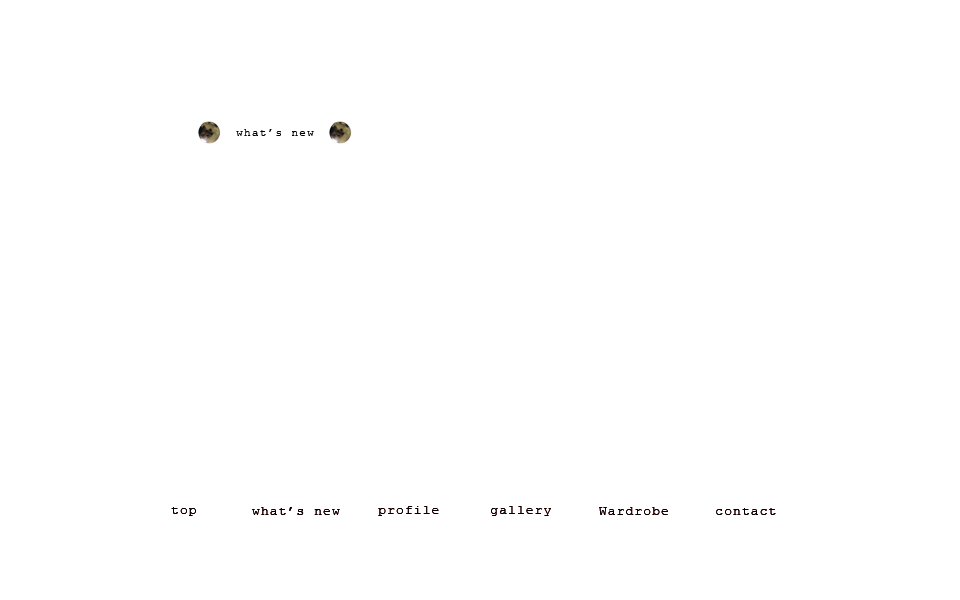
<style>
.page{position:relative;width:960px;height:600px;background:#ffffff}
.page>*{position:absolute;margin:0}
.t1{font:11.1px "CourierNewPSMT";letter-spacing:0.11em;color:#000000}
.t2{font:12.5px "CourierNewPSMT";letter-spacing:0.11em;color:#000000}
</style>
<div class="page">
<p class="t1" style="left:236px;top:129px;width:78px;height:7px">what’s new</p>
<p class="t2" style="left:171px;top:507px;width:25px;height:9px">top</p>
<p class="t2" style="left:171px;top:507px;width:25px;height:9px">top</p>
<p class="t2" style="left:252px;top:507px;width:88px;height:8px">what’s new</p>
<p class="t2" style="left:252px;top:507px;width:88px;height:8px">what’s new</p>
<p class="t2" style="left:378px;top:506px;width:61px;height:10px">profile</p>
<p class="t2" style="left:378px;top:506px;width:61px;height:10px">profile</p>
<p class="t2" style="left:491px;top:506px;width:60px;height:10px">gallery</p>
<p class="t2" style="left:491px;top:506px;width:60px;height:10px">gallery</p>
<p class="t2" style="left:599px;top:507px;width:69px;height:8px">Wardrobe</p>
<p class="t2" style="left:599px;top:507px;width:69px;height:8px">Wardrobe</p>
<p class="t2" style="left:716px;top:508px;width:60px;height:7px">contact</p>
<p class="t2" style="left:716px;top:508px;width:60px;height:7px">contact</p>
</div>
